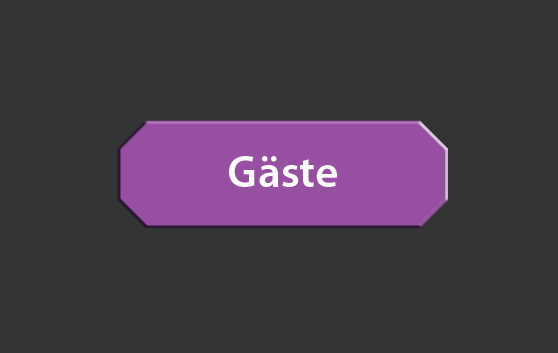
<style>
.page{position:relative;width:558px;height:353px;background:#333333}
.page>*{position:absolute;margin:0}
.t1{font:45px "MyriadPro-Semibold";color:#ffffff}
</style>
<div class="page">
<p class="t1" style="left:229px;top:156px;width:108px;height:31px">Gäste</p>
</div>
